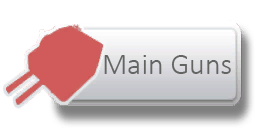
<style>
.page{position:relative;width:256px;height:128px;background:#ffffff}
.page>*{position:absolute;margin:0}
.t1{font:30px "Calibri-Light";color:#636563}
</style>
<div class="page">
<p class="t1" style="left:104px;top:55px;width:127px;height:19px">Main Guns</p>
</div>
